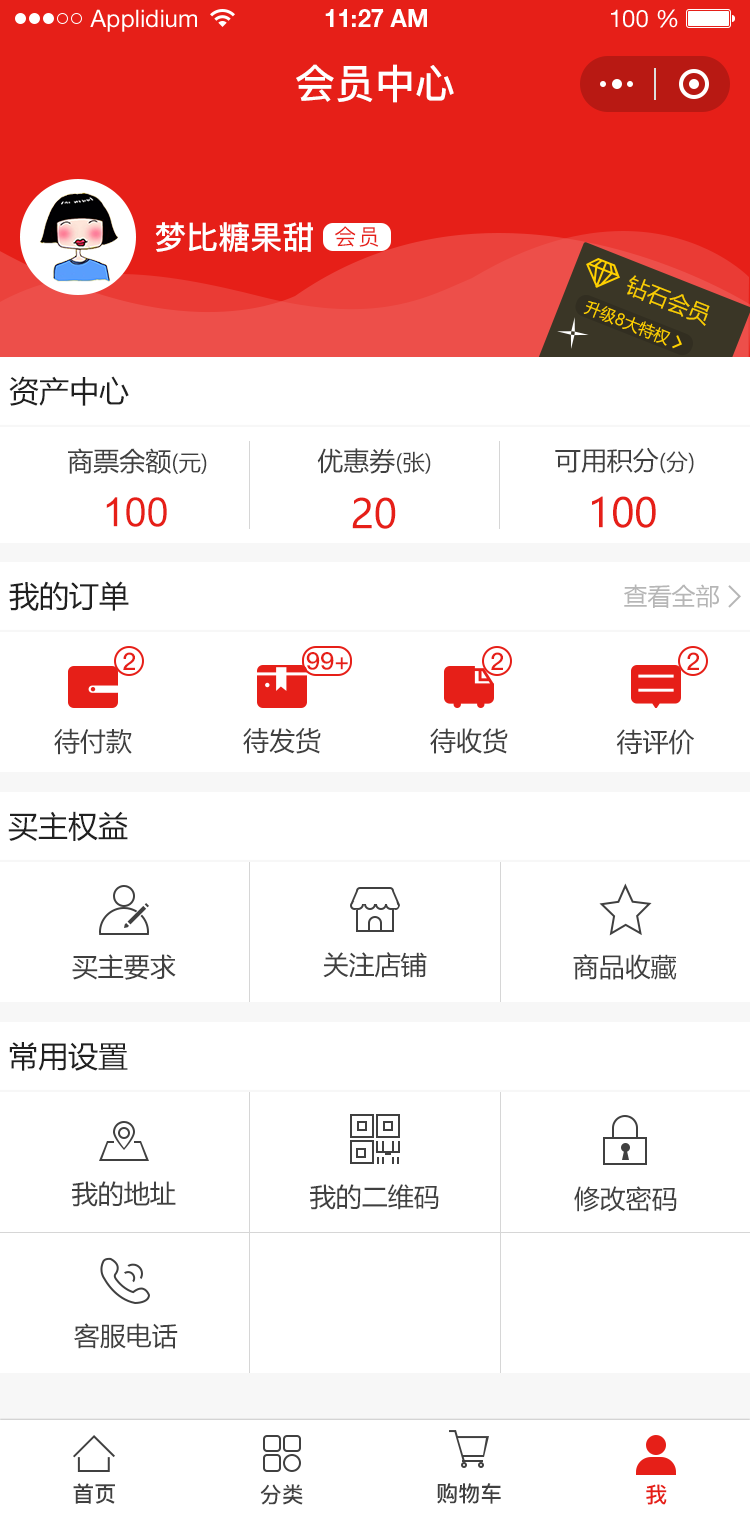
<style>
.page{position:relative;width:750px;height:1518px;background:#ffffff}
.page>*{position:absolute;margin:0}
.t1{font:24px "HelveticaNeueLTStd-Roman";color:#ffffff}
.t2{font:24px "HelveticaNeueLTStd-Bd";color:#ffffff}
.t3{font:40px "PingFang-SC-Bold";color:#ffffff;text-transform:uppercase}
.t4{font:32px "PingFang-SC-Bold";color:#ffffff;text-transform:uppercase}
.t5{font:22px "PingFang-SC-Medium";letter-spacing:0.08em;color:#e61f18}
.t6{font:22.1px "MicrosoftYaHei";color:#f9cd02;text-transform:uppercase}
.t7{font:16px "MicrosoftYaHei";color:#ffd100;text-transform:uppercase}
.t8{font:30px "MicrosoftYaHei";color:#202020;text-transform:uppercase}
.t9{font:26px "MicrosoftYaHei";color:#404040;text-transform:uppercase}
.t10{font:22px "MicrosoftYaHei";color:#404040;text-transform:uppercase}
.t11{font:40px "ArialMT";color:#e61f18;text-transform:uppercase}
.t12{font:40px "MicrosoftYaHei";color:#e61f18;text-transform:uppercase}
.t13{font:24px "MicrosoftYaHei";color:#b6b6b6;text-transform:uppercase}
.t14{font:24px "PingFang-SC-Bold";color:#e61f18;text-transform:uppercase}
.t15{font:22px "PingFang-SC-Bold";color:#404040;text-transform:uppercase}
.t16{font:22px "PingFang-SC-Bold";color:#e61f18;text-transform:uppercase}
</style>
<div class="page">
<p class="t1" style="left:90px;top:9px;width:107px;height:23px">Applidium</p>
<p class="t2" style="left:325px;top:9px;width:102px;height:18px">11:27 AM</p>
<p class="t1" style="left:611px;top:9px;width:67px;height:19px">100 %</p>
<p class="t3" style="left:296px;top:64px;width:158px;height:39px">会员中心</p>
<p class="t4" style="left:155px;top:222px;width:158px;height:30px">梦比糖果甜</p>
<p class="t5" style="left:335px;top:226px;width:44px;height:21px">会员</p>
<p class="t6" style="left:627px;top:275px;width:83px;height:51px;rotate:22deg">钻石会员</p>
<p class="t7" style="left:583px;top:301px;width:88px;height:45px;rotate:22deg">升级8大特权</p>
<p class="t8" style="left:9px;top:376px;width:120px;height:30px">资产中心</p>
<p class="t9" style="left:68px;top:448px;width:139px;height:26px">商票余额<span class="t10">(元)</span></p>
<p class="t9" style="left:317px;top:448px;width:114px;height:26px">优惠券<span class="t10">(张)</span></p>
<p class="t9" style="left:555px;top:447px;width:139px;height:27px">可用积分<span class="t10">(分)</span></p>
<p class="t11" style="left:106px;top:497px;width:61px;height:30px">100</p>
<p class="t12" style="left:352px;top:497px;width:44px;height:32px">20</p>
<p class="t12" style="left:592px;top:496px;width:64px;height:32px">100</p>
<p class="t8" style="left:9px;top:581px;width:120px;height:30px">我的订单</p>
<p class="t13" style="left:624px;top:584px;width:95px;height:24px">查看全部</p>
<p class="t14" style="left:123px;top:652px;width:12px;height:18px">2</p>
<p class="t14" style="left:306px;top:652px;width:42px;height:18px">99+</p>
<p class="t14" style="left:491px;top:652px;width:12px;height:18px">2</p>
<p class="t14" style="left:687px;top:652px;width:12px;height:18px">2</p>
<p class="t9" style="left:54px;top:728px;width:78px;height:27px">待付款</p>
<p class="t9" style="left:243px;top:727px;width:78px;height:27px">待发货</p>
<p class="t9" style="left:430px;top:728px;width:78px;height:26px">待收货</p>
<p class="t9" style="left:616px;top:729px;width:78px;height:26px">待评价</p>
<p class="t8" style="left:8px;top:811px;width:120px;height:30px">买主权益</p>
<p class="t9" style="left:323px;top:952px;width:104px;height:26px">关注店铺</p>
<p class="t9" style="left:72px;top:954px;width:104px;height:26px">买主要求</p>
<p class="t9" style="left:573px;top:954px;width:104px;height:26px">商品收藏</p>
<p class="t8" style="left:9px;top:1042px;width:119px;height:29px">常用设置</p>
<p class="t9" style="left:72px;top:1181px;width:104px;height:26px">我的地址</p>
<p class="t9" style="left:310px;top:1184px;width:129px;height:26px">我的二维码</p>
<p class="t9" style="left:574px;top:1186px;width:103px;height:26px">修改密码</p>
<p class="t9" style="left:74px;top:1323px;width:104px;height:26px">客服电话</p>
<p class="t15" style="left:73px;top:1483px;width:42px;height:21px">首页</p>
<p class="t15" style="left:260px;top:1484px;width:43px;height:21px">分类</p>
<p class="t15" style="left:437px;top:1483px;width:64px;height:21px">购物车</p>
<p class="t16" style="left:646px;top:1484px;width:21px;height:21px">我</p>
</div>
